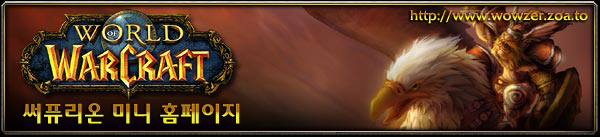
<style>
.page{position:relative;width:600px;height:137px}
.page>*{position:absolute;margin:0}
.t1{font:14px "2002L"}
.t2{font:24px "YDI2002"}
</style>
<div class="page">
<p class="t1" style="left:410px;top:9px;width:178px;height:15px">http://www.wowzer.zoa.to</p>
<p class="t2" style="left:22px;top:103px;width:218px;height:21px">써퓨리온 미니 홈페이지</p>
</div>
